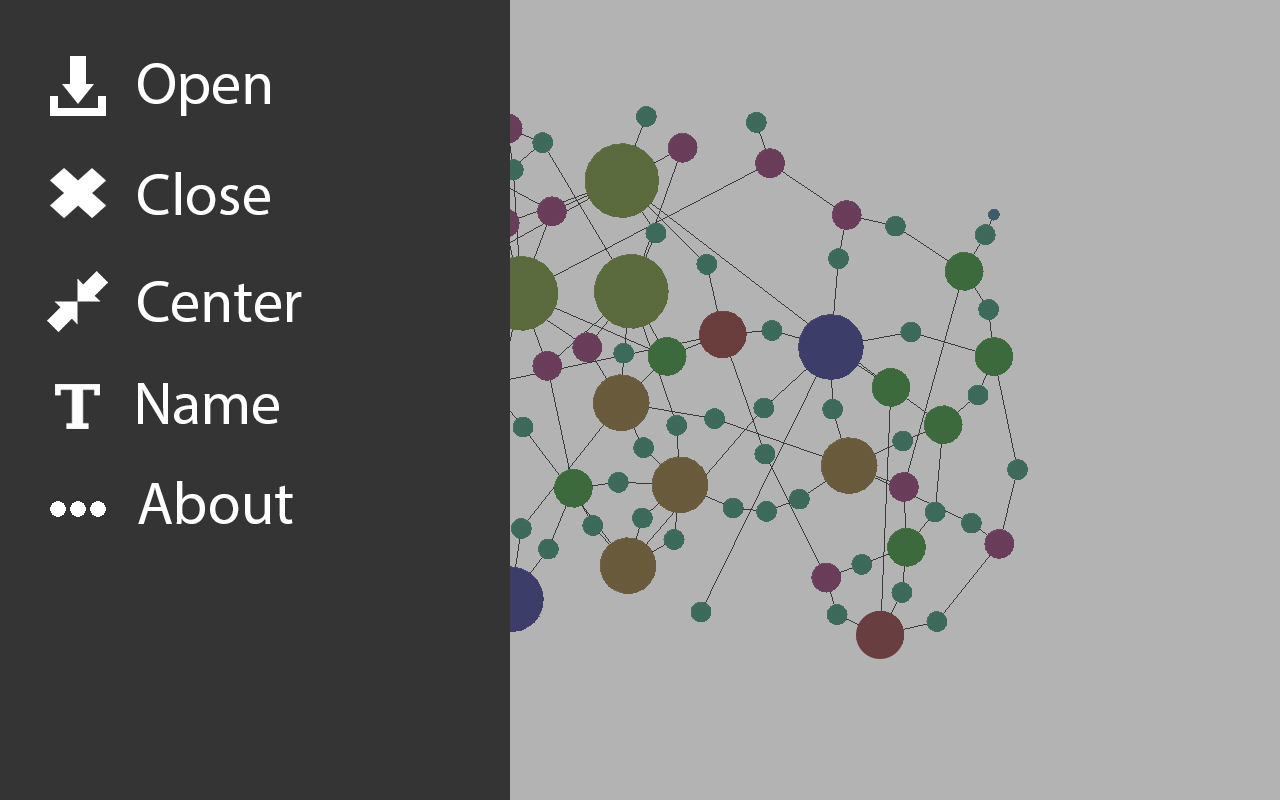
<style>
.page{position:relative;width:1280px;height:800px;background:#b3b3b3}
.page>*{position:absolute;margin:0}
.t1{font:60px "MyriadPro-Regular";color:#ffffff}
</style>
<div class="page">
<p class="t1" style="left:138px;top:63px;width:132px;height:53px">Open</p>
<p class="t1" style="left:138px;top:172px;width:132px;height:43px">Close</p>
<p class="t1" style="left:138px;top:281px;width:164px;height:41px">Center</p>
<p class="t1" style="left:138px;top:383px;width:141px;height:41px">Name</p>
<p class="t1" style="left:138px;top:481px;width:155px;height:43px">About</p>
</div>
